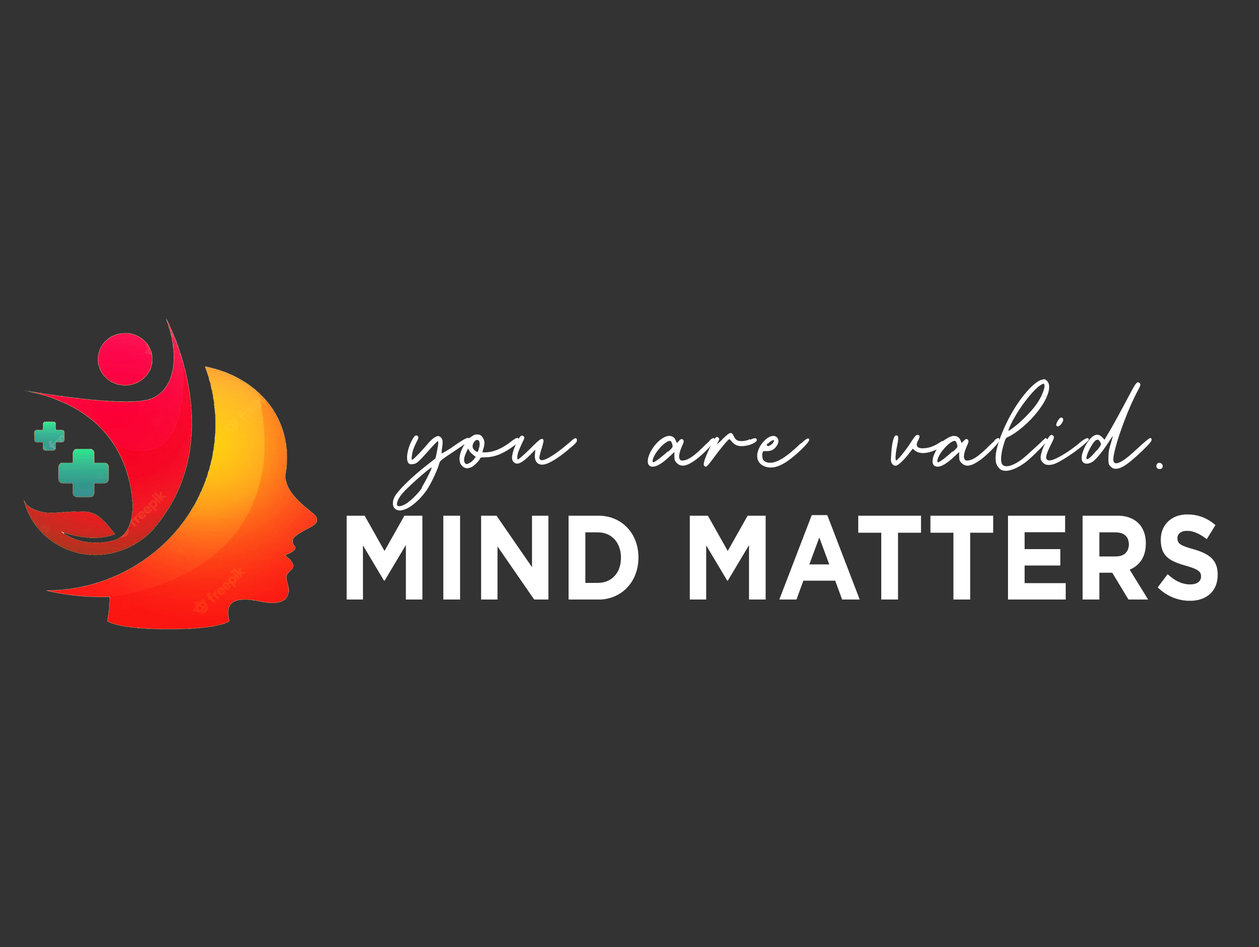
<style>
.page{position:relative;width:1259px;height:947px;background:#333333}
.page>*{position:absolute;margin:0}
.t1{font:255.4px "RetroSignatureRegular";letter-spacing:0.02em;color:#ffffff;scale:0.81 1}
.t2{font:119.8px "Gotham-Bold";letter-spacing:0.02em;color:#ffffff;scale:0.9 1}
</style>
<div class="page">
<p class="t1" style="left:393px;top:379px;width:770px;height:131px">you are valid.</p>
<p class="t2" style="left:346px;top:514px;width:872px;height:87px">MIND MATTERS</p>
</div>
